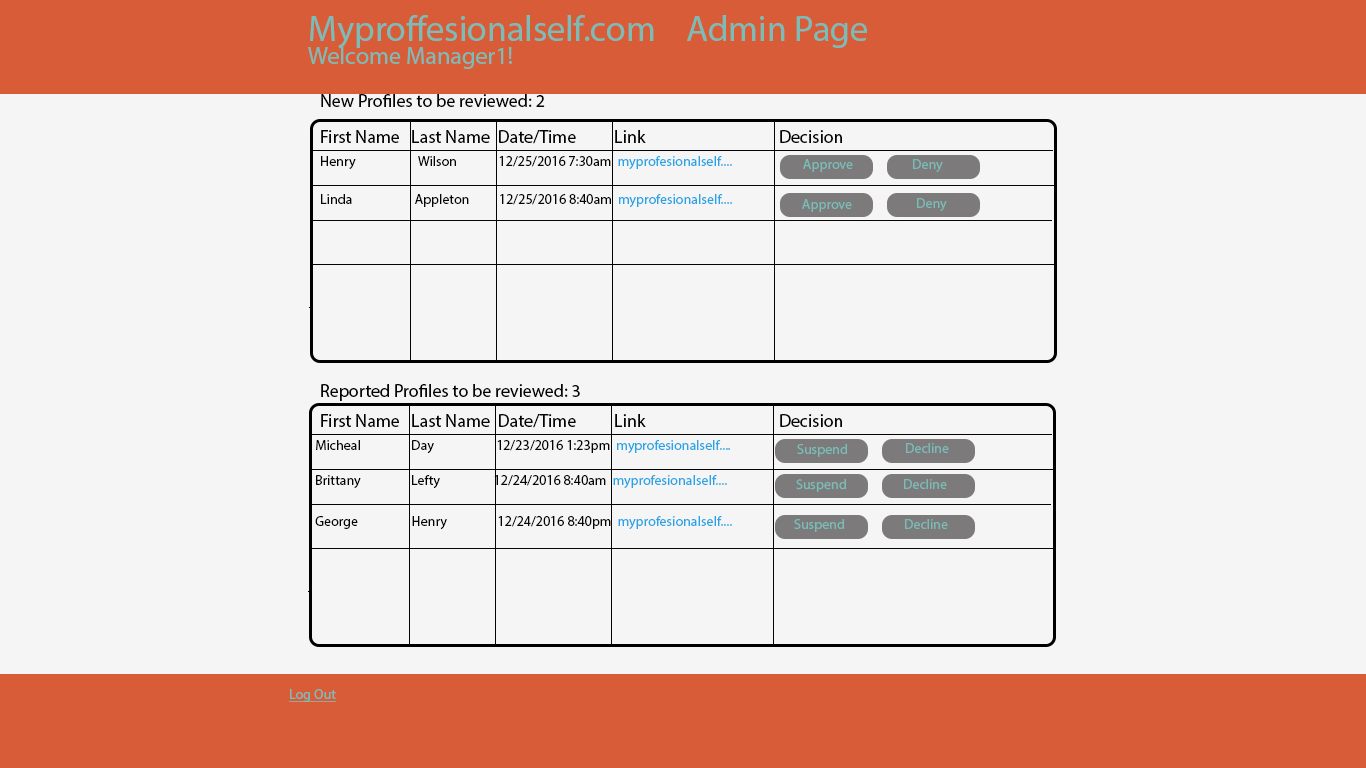
<style>
.page{position:relative;width:1366px;height:768px;background:#f5f5f5}
.page>*{position:absolute;margin:0}
.t1{font:36px "MyriadPro-Regular";color:#7abcb8}
.t2{font:24px "MyriadPro-Regular";color:#7abcb8}
.t3{font:18px "MyriadPro-Regular";color:#040404}
.t4{font:14px "MyriadPro-Regular";color:#040404}
.t5{font:14px "MyriadPro-Regular";color:#27a4e5}
.t6{font:14px "MyriadPro-Regular";color:#7abcb8}
.t7{font:14px "MyriadPro-Regular";color:#7abcb8;text-decoration:underline}
</style>
<div class="page">
<p class="t1" style="left:310px;top:15px;width:557px;height:34px">Myproffesionalself.com    Admin Page</p>
<p class="t2" style="left:308px;top:47px;width:204px;height:22px">Welcome Manager1!</p>
<p class="t3" style="left:321px;top:94px;width:224px;height:13px">New Profiles to be reviewed: 2</p>
<p class="t3" style="left:321px;top:130px;width:521px;height:14px">First Name   Last Name  Date/Time          Link                                   Decision</p>
<p class="t4" style="left:321px;top:156px;width:411px;height:13px">Henry                      Wilson              12/25/2016 7:30am  <span class="t5">myprofesionalself....</span></p>
<p class="t6" style="left:803px;top:159px;width:50px;height:13px">Approve</p>
<p class="t6" style="left:913px;top:159px;width:30px;height:13px">Deny</p>
<p class="t4" style="left:321px;top:194px;width:411px;height:14px">Linda                     Appleton          12/25/2016 8:40am  <span class="t5">myprofesionalself....</span></p>
<p class="t6" style="left:917px;top:198px;width:30px;height:13px">Deny</p>
<p class="t6" style="left:802px;top:199px;width:50px;height:13px">Approve</p>
<p class="t3" style="left:321px;top:384px;width:259px;height:17px">Reported Profiles to be reviewed: 3</p>
<p class="t3" style="left:321px;top:414px;width:521px;height:14px">First Name   Last Name  Date/Time          Link                                   Decision</p>
<p class="t4" style="left:316px;top:440px;width:414px;height:14px">Micheal                 Day                     12/23/2016 1:23pm  <span class="t5">myprofesionalself....</span></p>
<p class="t6" style="left:797px;top:444px;width:50px;height:13px">Suspend</p>
<p class="t6" style="left:906px;top:443px;width:43px;height:10px">Decline</p>
<p class="t4" style="left:316px;top:475px;width:411px;height:14px">Brittany                 Lefty                  12/24/2016 8:40am  <span class="t5">myprofesionalself....</span></p>
<p class="t6" style="left:796px;top:478px;width:50px;height:14px">Suspend</p>
<p class="t6" style="left:904px;top:479px;width:43px;height:10px">Decline</p>
<p class="t4" style="left:315px;top:516px;width:417px;height:14px">George                  Henry                 12/24/2016 8:40pm  <span class="t5">myprofesionalself....</span></p>
<p class="t6" style="left:794px;top:519px;width:50px;height:13px">Suspend</p>
<p class="t6" style="left:905px;top:519px;width:43px;height:10px">Decline</p>
<p class="t7" style="left:289px;top:689px;width:47px;height:13px">Log Out</p>
</div>
